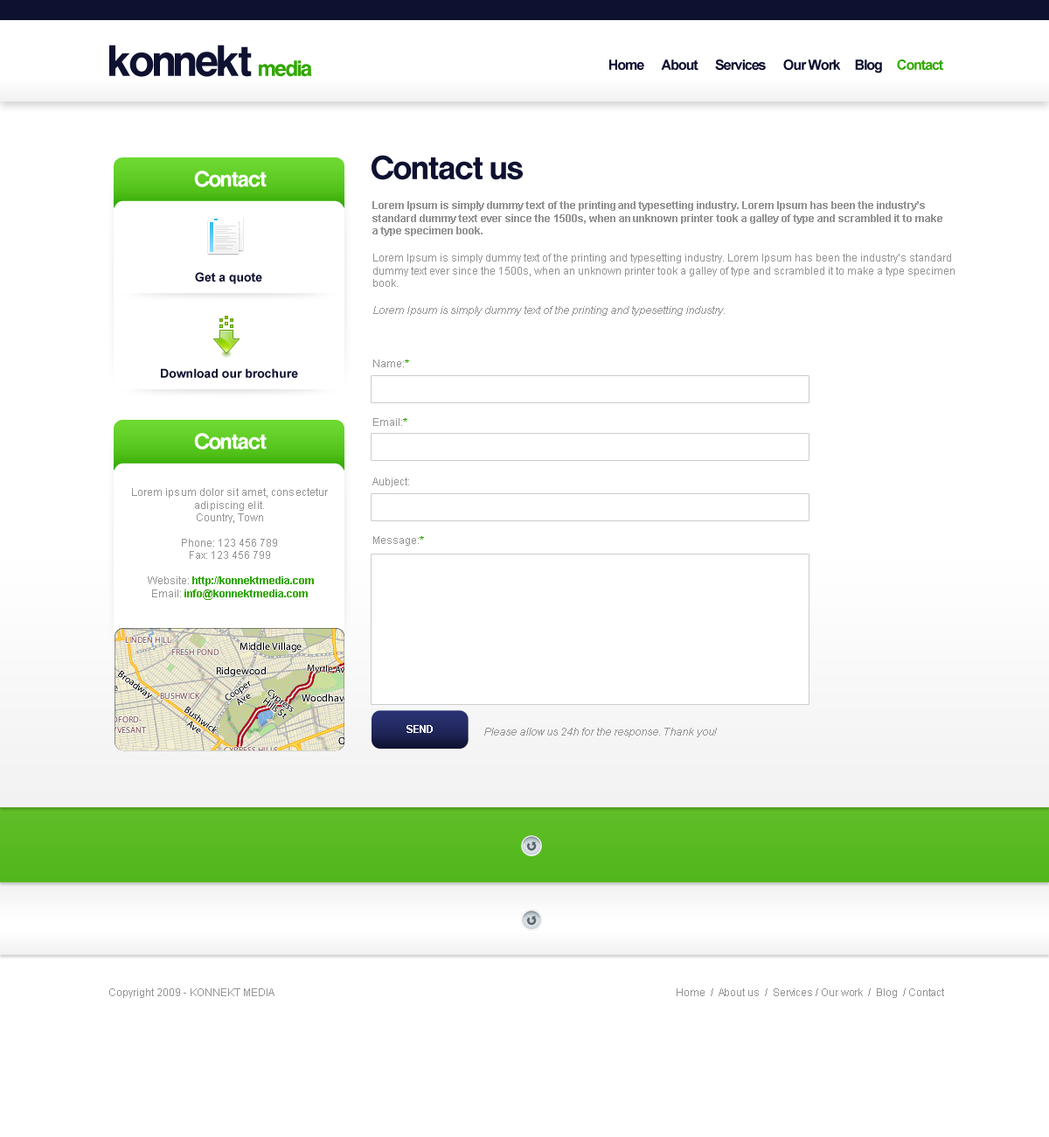
<style>
.page{position:relative;width:1049px;height:1137px;background:#ffffff}
.page>*{position:absolute;margin:0}
.t1{font:42px "MgOpenModerna-Bold";letter-spacing:-0.06em;color:#0e1130}
.t2{font:21px "MgOpenModerna-Bold";letter-spacing:-0.06em;color:#32a700}
.t3{font:14px "Arial-BoldMT";letter-spacing:-0.065em;color:#0e1130}
.t4{font:14px "Arial-BoldMT";letter-spacing:-0.065em;color:#32a700}
.t5{font:31.5px "MgOpenModerna-Bold";letter-spacing:-0.04em;color:#0e1130}
.t6{font:21px "MgOpenModerna-Bold";letter-spacing:-0.06em;color:#ffffff}
.t7{font:10.5px "Arial-BoldMT";color:#949494}
.t8{font:10.5px "ArialMT";color:#949494}
.t9{font:12.2px "Arial-BoldMT";color:#0e1130}
.t10{font:10.5px "Arial-ItalicMT";color:#949494}
.t11{font:10.5px "ArialMT";color:#32a700}
.t12{font:10.5px "Arial-BoldMT";color:#32a700}
.t13{font:10.5px "Arial-BoldMT";color:#ffffff}
</style>
<div class="page">
<p class="t1" style="left:109px;top:45px;width:143px;height:32px">konnekt</p>
<p class="t2" style="left:259px;top:60px;width:53px;height:17px">media</p>
<p class="t3" style="left:609px;top:59px;width:334px;height:14px">Home      About      Services      Our Work     Blog     <span class="t4">Contact</span></p>
<p class="t5" style="left:372px;top:155px;width:151px;height:25px">Contact us</p>
<p class="t6" style="left:194px;top:170px;width:73px;height:17px">Contact</p>
<p class="t7" style="left:372px;top:201px;width:570px;height:35px">Lorem Ipsum is simply dummy text of the printing and typesetting industry. Lorem Ipsum has been the industry’s standard dummy text ever since the 1500s, when an unknown printer took a galley of type and scrambled it to make a type specimen book.</p>
<p class="t8" style="left:373px;top:254px;width:582px;height:33px">Lorem Ipsum is simply dummy text of the printing and typesetting industry. Lorem Ipsum has been the industry’s standard dummy text ever since the 1500s, when an unknown printer took a galley of type and scrambled it to make a type specimen book.</p>
<p class="t9" style="left:195px;top:272px;width:67px;height:12px">Get a quote</p>
<p class="t10" style="left:373px;top:306px;width:352px;height:10px">Lorem Ipsum is simply dummy text of the printing and typesetting industry.</p>
<p class="t8" style="left:373px;top:359px;width:36px;height:8px">Name:<span class="t11">*</span></p>
<p class="t9" style="left:161px;top:368px;width:137px;height:10px">Download our brochure</p>
<p class="t8" style="left:373px;top:418px;width:34px;height:8px">Email:<span class="t11">*</span></p>
<p class="t6" style="left:194px;top:433px;width:73px;height:16px">Contact</p>
<p class="t8" style="left:372px;top:477px;width:37px;height:10px">Aubject:</p>
<p class="t8" style="left:132px;top:488px;width:196px;height:112px;text-align:center">Lorem ipsum dolor sit amet, consectetur adipiscing elit.<br>Country, Town <br><br>Phone: 123 456 789<br>Fax: 123 456 799<br><br> Website: <span class="t12">http://konnektmedia.com<br></span>Email: <span class="t12">info@konnektmedia.com</span></p>
<p class="t8" style="left:373px;top:536px;width:51px;height:10px">Message:<span class="t11">*</span></p>
<p class="t13" style="left:407px;top:725px;width:26px;height:8px">SEND</p>
<p class="t10" style="left:484px;top:727px;width:233px;height:10px">Please allow us 24h for the response. Thank you!</p>
<p class="t8" style="left:109px;top:988px;width:166px;height:10px">Copyright 2009 - KONNEKT MEDIA</p>
<p class="t8" style="left:677px;top:988px;width:267px;height:10px">Home  /  About us  /  Services / Our work  /  Blog  / Contact</p>
</div>
